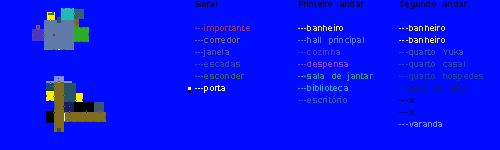
<style>
.page{position:relative;width:500px;height:150px;background:#000cff}
.page>*{position:absolute;margin:0}
.t1{font:10px "Latha";letter-spacing:0.025em;color:#b72929}
.t2{font:10px "Latha";letter-spacing:0.025em;color:#000000}
.t3{font:10px "Latha";letter-spacing:0.025em;color:#7e6b1f}
.t4{font:10px "Latha";letter-spacing:0.025em;color:#595959}
.t5{font:10px "Latha";letter-spacing:0.025em;color:#394a66}
.t6{font:10px "Latha";letter-spacing:0.025em;color:#3c6f00}
.t7{font:10px "Latha";letter-spacing:0.025em;color:#ffffff}
.t8{font:10px "Latha";letter-spacing:0.025em;color:#5f7ba9}
.t9{font:10px "Latha";letter-spacing:0.025em;color:#fff000}
.t10{font:10px "Latha";letter-spacing:0.025em;color:#4d37bd}
.t11{font:10px "Latha";letter-spacing:0.025em;color:#ad3a99}
.t12{font:10px "Latha";letter-spacing:0.025em;color:#2aac23}
.t13{font:10px "Latha";letter-spacing:0.025em;color:#22b8b3}
.t14{font:10px "Latha";letter-spacing:0.025em;color:#336075}
.t15{font:10px "Latha";letter-spacing:0.025em;color:#3d5866}
.t16{font:10px "Latha";letter-spacing:0.025em;color:#295266}
.t17{font:10px "Latha";letter-spacing:0.025em;color:#144b66}
.t18{font:10px "Latha";letter-spacing:0.025em;color:#141e66}
.t19{font:10px "Latha";letter-spacing:0.025em;color:#7f8de2}
</style>
<div class="page">
<p class="t1" style="left:195px;top:1px;width:55px;height:92px"><span class="t2">Geral<br><br></span>---importante<br><span class="t3">---corredor<br></span><span class="t4">---janela</span><span class="t5"><br>---escadas<br></span><span class="t6">---esconder<br></span><span class="t7">---porta</span></p>
<p class="t8" style="left:298px;top:0px;width:75px;height:103px"><span class="t2">Primeiro andar<br><br></span><span class="t9">---banheiro<br></span>---hall principal<span class="t10"><br>---cozinha<br></span><span class="t11">---despensa<br></span><span class="t12">---sala de jantar</span><span class="t13"><br>---biblioteca<br></span><span class="t14">---escritório</span></p>
<p class="t9" style="left:399px;top:1px;width:84px;height:126px"><span class="t2">Segundo andar<br><br></span>---banheiro<br>---banheiro<br><span class="t15">---quarto Yuka<br></span><span class="t16">---quarto casal<br></span><span class="t17">---quarto hospedes<br></span><span class="t18">---sala de arte<br></span><span class="t2">---x<br>---x<br></span><span class="t19">---varanda</span></p>
</div>
